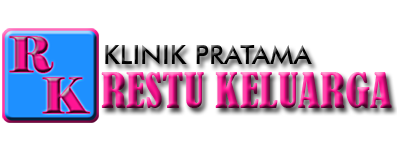
<style>
.page{position:relative;width:397px;height:142px;background:#ffffff}
.page>*{position:absolute;margin:0}
.t1{font:27px "FuturaBT-Medium";color:#000000}
.t2{font:46px "BernardMT-Condensed"}
</style>
<div class="page">
<p class="t1" style="left:105px;top:45px;width:207px;height:19px">KLINIK PRATAMA</p>
<p class="t2" style="left:101px;top:72px;width:291px;height:36px">RESTU KELUARGA</p>
</div>
